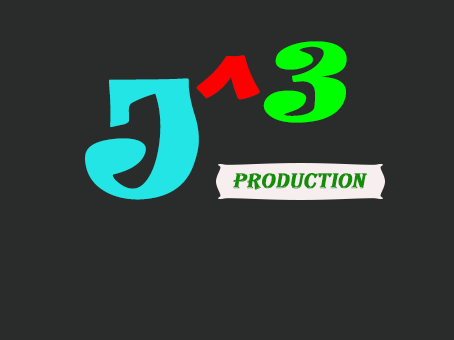
<style>
.page{position:relative;width:454px;height:340px;background:#2a2c2c}
.page>*{position:absolute;margin:0}
.t1{font:100px "Ravie";color:#00ff00;font-weight:bold;font-style:italic}
.t2{font:150px "Ravie";color:#ff0000;font-weight:bold;font-style:italic}
.t3{font:150px "Ravie";color:#24e5e5;font-weight:bold;font-style:italic}
.t4{font:22px "Algerian";color:#138e07;font-weight:bold;font-style:italic}
</style>
<div class="page">
<p class="t1" style="left:263px;top:41px;width:84px;height:82px">3</p>
<p class="t2" style="left:196px;top:55px;width:64px;height:45px">^</p>
<p class="t3" style="left:85px;top:78px;width:114px;height:122px">J</p>
<p class="t4" style="left:233px;top:173px;width:135px;height:17px">Production</p>
</div>
